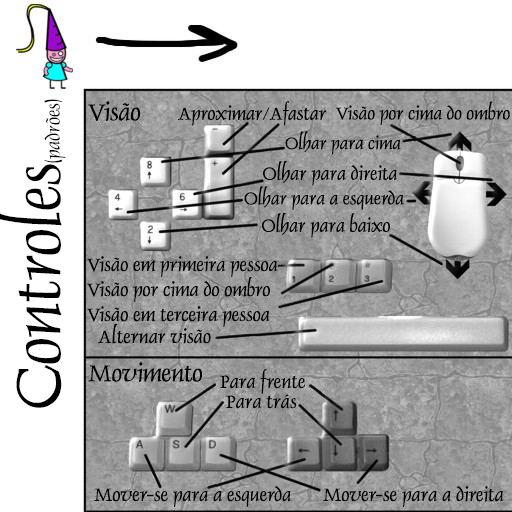
<style>
.page{position:relative;width:512px;height:512px;background:#ffffff}
.page>*{position:absolute;margin:0}
.t1{font:35px "Dauphin-Normal";letter-spacing:-0.002em;color:#000000}
.t2{font:45px "Dauphin-Normal";letter-spacing:-0.01em;color:#000000}
.t3{font:34px "Dauphin-Normal";letter-spacing:-0.002em;color:#000000}
.t4{font:33px "Dauphin-Normal";letter-spacing:-0.002em;color:#000000}
.t5{font:32px "Dauphin-Normal";letter-spacing:-0.002em;color:#000000}
.t6{font:34.7px "Dauphin-Normal";letter-spacing:-0.002em;color:#000000}
.t7{font:34.7px "Dauphin-Normal";letter-spacing:-0.002em}
</style>
<div class="page">
<p class="t1" style="left:44px;top:99px;width:22px;height:64px;rotate:-90deg">(padrões)</p>
<p class="t2" style="left:88px;top:101px;width:53px;height:20px">Visão</p>
<p class="t3" style="left:178px;top:101px;width:148px;height:25px">Aproximar/Afastar</p>
<p class="t4" style="left:336px;top:101px;width:174px;height:25px">Visão por cima do ombro</p>
<p class="t5" style="left:285px;top:131px;width:116px;height:24px">Olhar para cima</p>
<p class="t3" style="left:263px;top:161px;width:135px;height:25px">Olhar para direita</p>
<p class="t4" style="left:244px;top:186px;width:160px;height:25px">Olhar para a esquerda</p>
<p class="t3" style="left:262px;top:213px;width:128px;height:25px">Olhar para baixo</p>
<p class="t6" style="left:87px;top:256px;width:191px;height:21px">Visão em primeira pessoa</p>
<p class="t6" style="left:87px;top:277px;width:183px;height:25px">Visão por cima do ombro</p>
<p class="t6" style="left:87px;top:306px;width:183px;height:21px">Visão em terceira pessoa</p>
<p class="t6" style="left:98px;top:324px;width:113px;height:20px">Alternar visão</p>
<p class="t2" style="left:88px;top:362px;width:78px;height:27px">Moving</p>
<p class="t2" style="left:88px;top:362px;width:114px;height:20px">Movimento</p>
<p class="t6" style="left:220px;top:368px;width:85px;height:26px">Para frente</p>
<p class="t7" style="left:226px;top:389px;width:72px;height:22px">Backward</p>
<p class="t6" style="left:226px;top:394px;width:71px;height:15px">Para trás</p>
<p class="t6" style="left:94px;top:486px;width:198px;height:21px">Mover-se para a esquerda</p>
<p class="t6" style="left:323px;top:486px;width:181px;height:21px">Mover-se para a direita</p>
</div>
